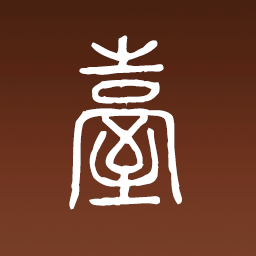
<style>
.page{position:relative;width:256px;height:256px}
.page>*{position:absolute;margin:0}
.t1{font:200px "EBAS";color:#ffffff}
</style>
<div class="page">
<p class="t1" style="left:69px;top:35px;width:113px;height:175px">臺</p>
</div>
